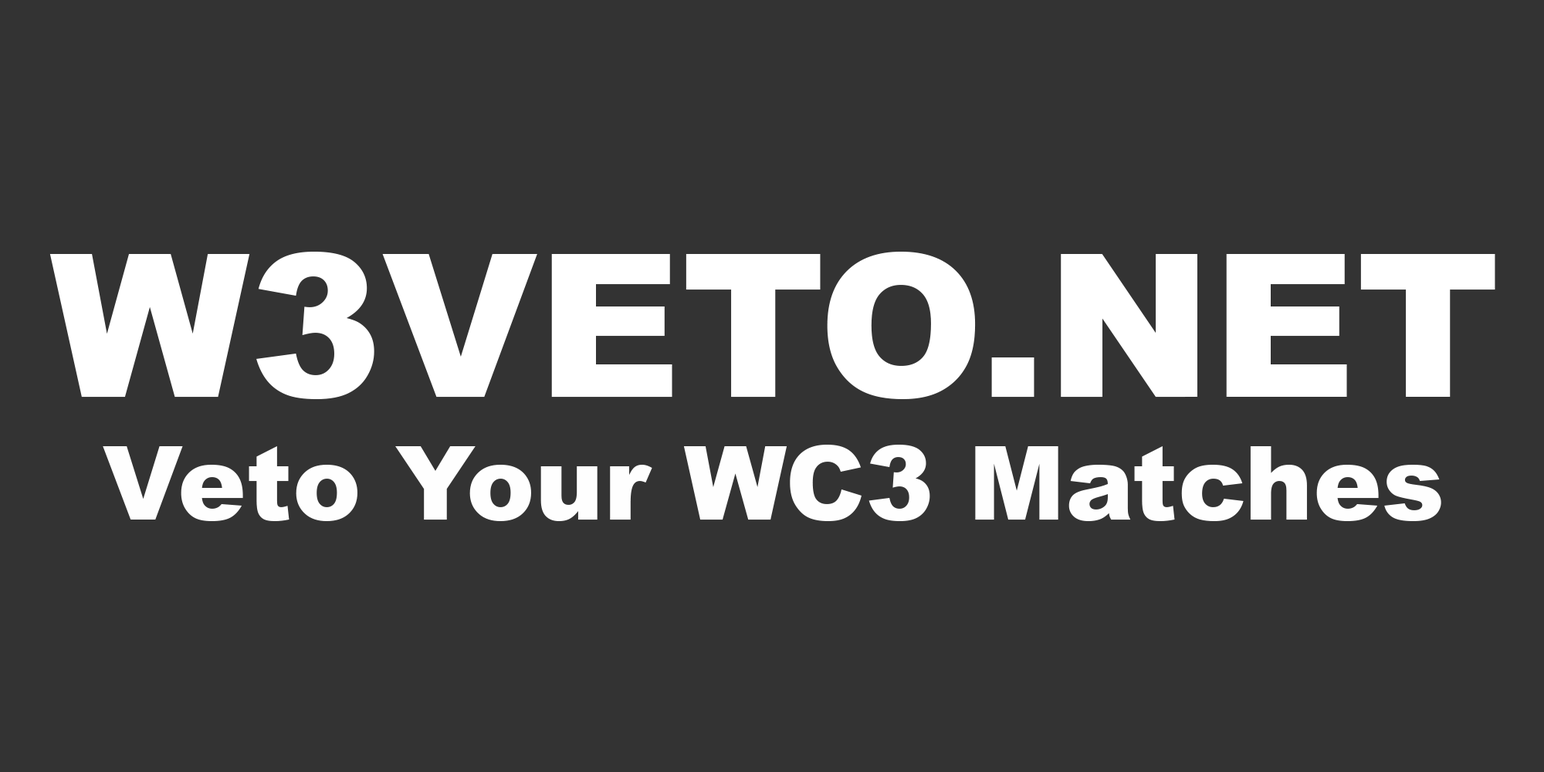
<style>
.page{position:relative;width:1544px;height:772px;background:#333333}
.page>*{position:absolute;margin:0}
.t1{font:199.5px "Arial-Black";color:#ffffff}
.t2{font:103px "Arial-Black";color:#fefefe}
</style>
<div class="page">
<p class="t1" style="left:49px;top:252px;width:1447px;height:147px">W3VETO.NET</p>
<p class="t2" style="left:103px;top:445px;width:1339px;height:76px">Veto Your WC3 Matches</p>
</div>
